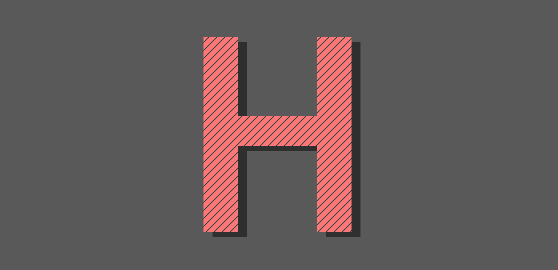
<style>
.page{position:relative;width:558px;height:270px;background:#595959}
.page>*{position:absolute;margin:0}
.t1{font:297.5px "SourceSansPro-Semibold";color:#fe7676}
.t2{font:297.5px "SourceSansPro-Semibold"}
</style>
<div class="page">
<p class="t1" style="left:203px;top:37px;width:149px;height:195px">H</p>
<p class="t2" style="left:212px;top:42px;width:149px;height:195px">H</p>
</div>
